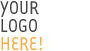
<style>
.page{position:relative;width:90px;height:51px;background:#ffffff}
.page>*{position:absolute;margin:0}
.t1{font:21px/18px "TarzanaNarrow";color:#444545;text-transform:uppercase}
.t2{font:21px/18px "TarzanaNarrow";color:#f4ad47;text-transform:uppercase}
</style>
<div class="page">
<p class="t1" style="left:0px;top:1px;width:42px;height:50px">your <br>logo <br><span class="t2">here!</span></p>
</div>
